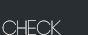
<style>
.page{position:relative;width:88px;height:35px;background:#292e32}
.page>*{position:absolute;margin:0}
.t1{font:20px "Code-Light";color:#ffffff}
</style>
<div class="page">
<p class="t1" style="left:2px;top:20px;width:59px;height:15px">check</p>
</div>
